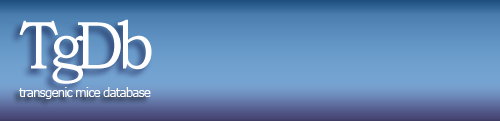
<style>
.page{position:relative;width:500px;height:121px}
.page>*{position:absolute;margin:0}
.t1{font:68px "BookmanOldStyle";letter-spacing:-0.13em;color:#ffffff;scale:0.9 1}
.t2{font:12px "Verdana";letter-spacing:-0.08em;color:#ffffff}
</style>
<div class="page">
<p class="t1" style="left:19px;top:19px;width:133px;height:65px">TgDb</p>
<p class="t2" style="left:19px;top:87px;width:132px;height:12px">transgenic mice database</p>
</div>
